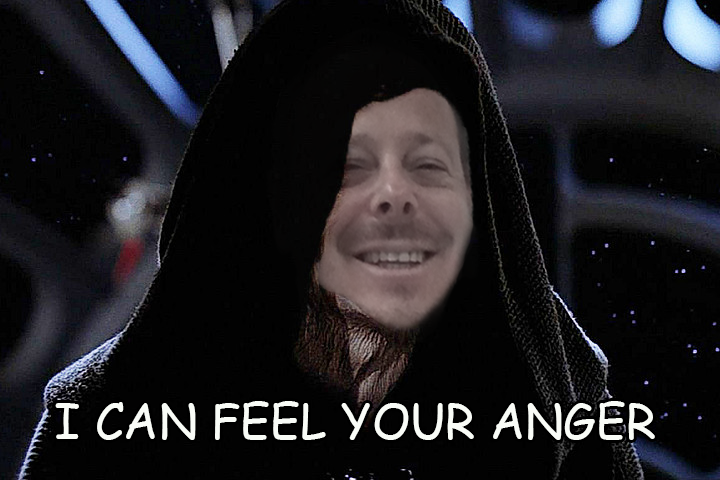
<style>
.page{position:relative;width:720px;height:480px;background:#020202}
.page>*{position:absolute;margin:0}
.t1{font:48px "ComicSansMS";color:#f9fcf7;text-transform:uppercase}
</style>
<div class="page">
<p class="t1" style="left:55px;top:401px;width:600px;height:39px">I can feel your anger</p>
</div>
